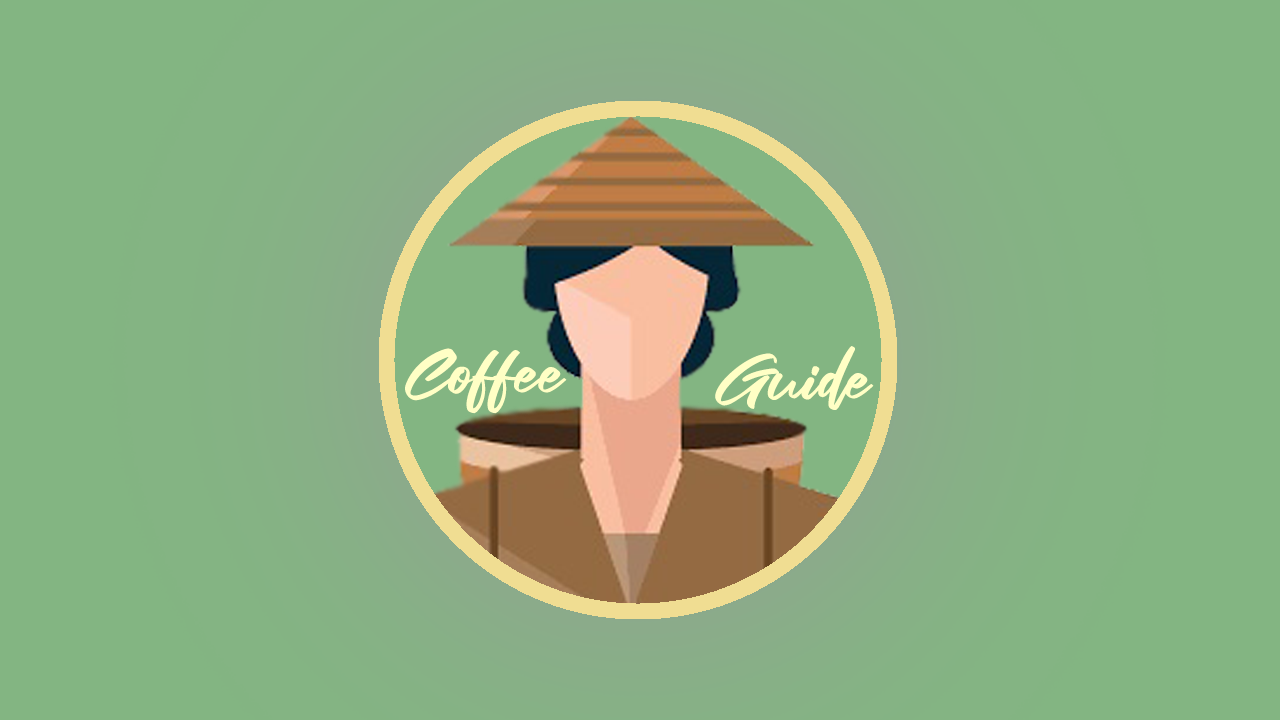
<style>
.page{position:relative;width:1280px;height:720px;background:#83b582}
.page>*{position:absolute;margin:0}
.t1{font:66.6px "Fair-Prosper";color:#ffffc5}
</style>
<div class="page">
<p class="t1" style="left:405px;top:348px;width:162px;height:66px">Coffee</p>
<p class="t1" style="left:715px;top:346px;width:159px;height:64px">Guide</p>
</div>
